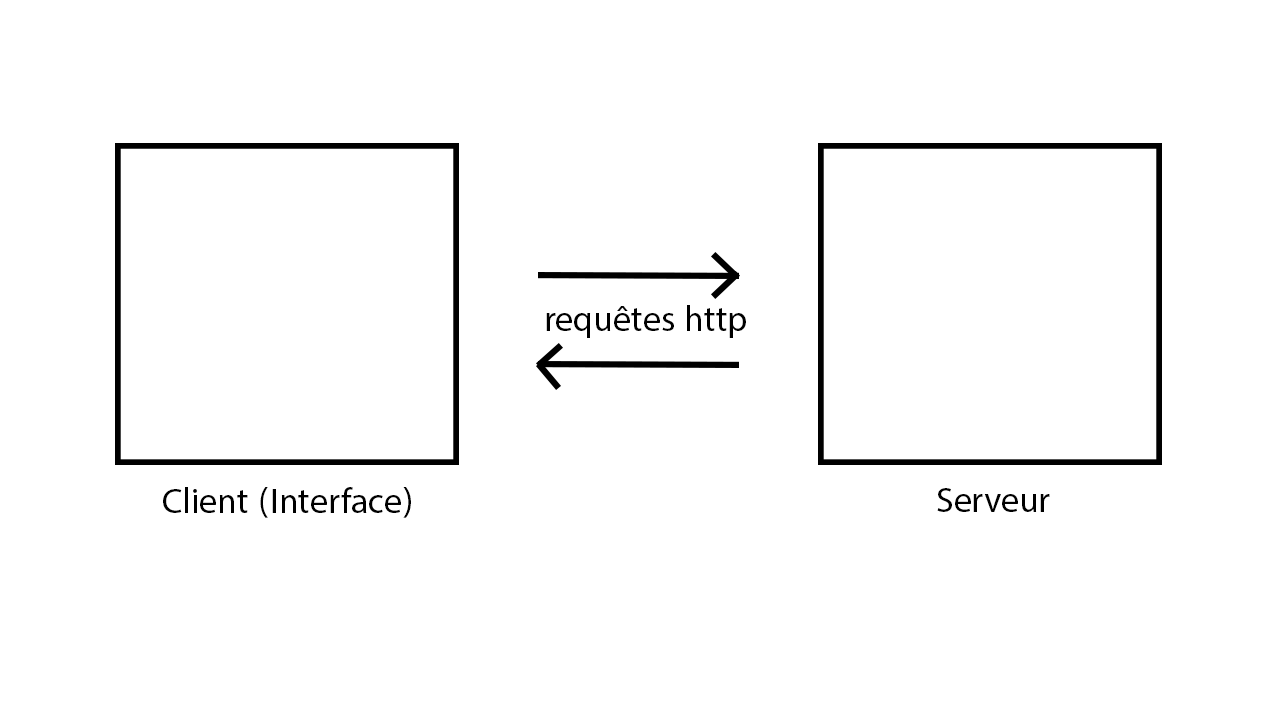
<style>
.page{position:relative;width:1280px;height:720px;background:#ffffff}
.page>*{position:absolute;margin:0}
.t1{font:50px "MyriadArabic-Regular";color:#000000}
</style>
<div class="page">
<p class="t1" style="left:546px;top:305px;width:200px;height:33px">requêtes http</p>
<p class="t1" style="left:163px;top:487px;width:248px;height:31px">Client (Interface)</p>
<p class="t1" style="left:937px;top:488px;width:113px;height:24px">Serveur</p>
</div>
